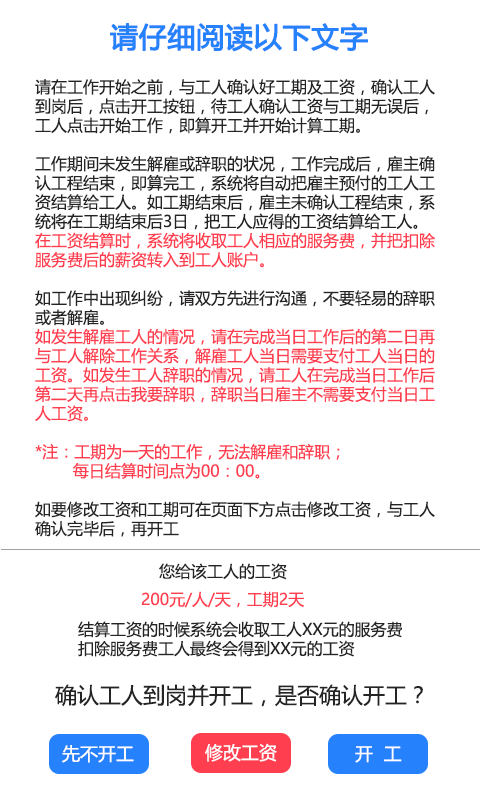
<style>
.page{position:relative;width:480px;height:800px;background:#ffffff}
.page>*{position:absolute;margin:0}
.t1{font:16px "MicrosoftYaHei";color:#252323}
.t2{font:22px "MicrosoftYaHei";color:#2681fc;font-weight:bold}
.t3{font:28px "MicrosoftYaHei";color:#2681fc;font-weight:bold}
.t4{font:16px "MicrosoftYaHei";color:#ff3e50}
.t5{font:22px "MicrosoftYaHei";color:#252323}
.t6{font:18px "MicrosoftYaHei";color:#ffffff}
</style>
<div class="page">
<p class="t1" style="left:35px;top:22px;width:400px;height:515px"><span class="t2">        </span><span class="t3">  请仔细阅读以下文字<br><br></span>请在工作开始之前，与工人确认好工期及工资，确认工人<br>到岗后，点击开工按钮，待工人确认工资与工期无误后，<br>工人点击开始工作，即算开工并开始计算工期。<br><br>工作期间未发生解雇或辞职的状况，工作完成后，雇主确<br>认工程结束，即算完工，系统将自动把雇主预付的工人工<br>资结算给工人。如工期结束后，雇主未确认工程结束，系<br>统将在工期结束后3日，把工人应得的工资结算给工人。<br><span class="t4">在工资结算时，系统将收取工人相应的服务费，并把扣除<br>服务费后的薪资转入到工人账户。<br><br></span>如工作中出现纠纷，请双方先进行沟通，不要轻易的辞职<br>或者解雇。<br><span class="t4">如发生解雇工人的情况，请在完成当日工作后的第二日再<br>与工人解除工作关系，解雇工人当日需要支付工人当日的<br>工资。如发生工人辞职的情况，请工人在完成当日工作后<br>第二天再点击我要辞职，辞职当日雇主不需要支付当日工<br>人工资。<br><br>*注：工期为一天的工作，无法解雇和辞职；<br>        每日结算时间点为00：00。<br></span><br>如要修改工资和工期可在页面下方点击修改工资，与工人<br>确认完毕后，再开工</p>
<p class="t1" style="left:159px;top:563px;width:128px;height:17px">您给该工人的工资</p>
<p class="t4" style="left:141px;top:591px;width:163px;height:17px">200元/人/天，工期2天</p>
<p class="t1" style="left:78px;top:621px;width:324px;height:36px">结算工资的时候系统会收取工人XX元的服务费<br>扣除服务费工人最终会得到XX元的工资</p>
<p class="t5" style="left:55px;top:684px;width:368px;height:23px">确认工人到岗并开工，是否确认开工？</p>
<p class="t6" style="left:62px;top:745px;width:72px;height:18px">先不开工</p>
<p class="t6" style="left:205px;top:743px;width:72px;height:19px">修改工资</p>
<p class="t6" style="left:355px;top:746px;width:47px;height:17px">开  工</p>
</div>
